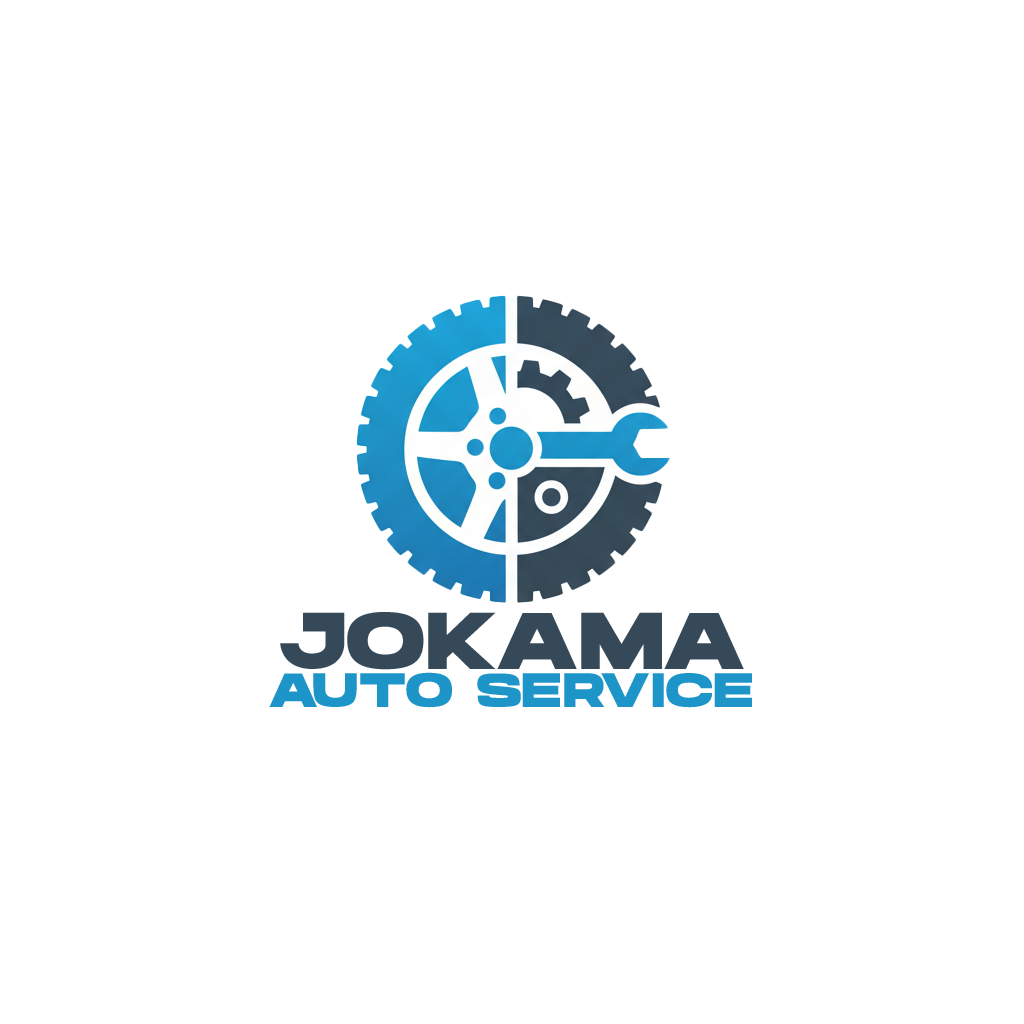
<style>
.page{position:relative;width:1024px;height:1024px;background:#ffffff}
.page>*{position:absolute;margin:0}
.t1{font:80px "HansonBold";color:#364959;text-transform:uppercase}
.t2{font:48px "HansonBold";color:#1e95c8;text-transform:uppercase}
</style>
<div class="page">
<p class="t1" style="left:280px;top:612px;width:464px;height:58px">JOKAMA</p>
<p class="t2" style="left:269px;top:672px;width:483px;height:36px">AUTO SERVICE</p>
</div>
